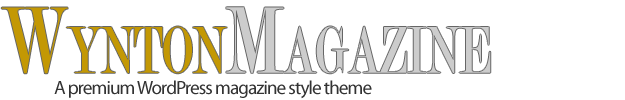
<style>
.page{position:relative;width:625px;height:100px;background:#ffffff}
.page>*{position:absolute;margin:0}
.t1{font:101.3px "Modern-Regular";color:#cccccc;font-variant:small-caps;scale:0.67 1}
.t2{font:101.3px "Modern-Regular";color:#c39804;font-variant:small-caps;scale:0.67 1}
.t3{font:19.1px "MyriadPro-Regular";letter-spacing:-0.05em;color:#333333}
</style>
<div class="page">
<p class="t1" style="left:1px;top:7px;width:490px;height:67px"><span class="t2">Wynton</span>Magazine</p>
<p class="t3" style="left:54px;top:80px;width:318px;height:19px">A premium WordPress magazine style theme</p>
</div>
